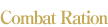
<style>
.page{position:relative;width:108px;height:27px;background:#ffffff}
.page>*{position:absolute;margin:0}
.t1{font:18px "RyuminPro-ExBold";letter-spacing:-0.09em;color:#c4a956}
</style>
<div class="page">
<p class="t1" style="left:0px;top:10px;width:108px;height:15px">Combat Ration</p>
</div>
